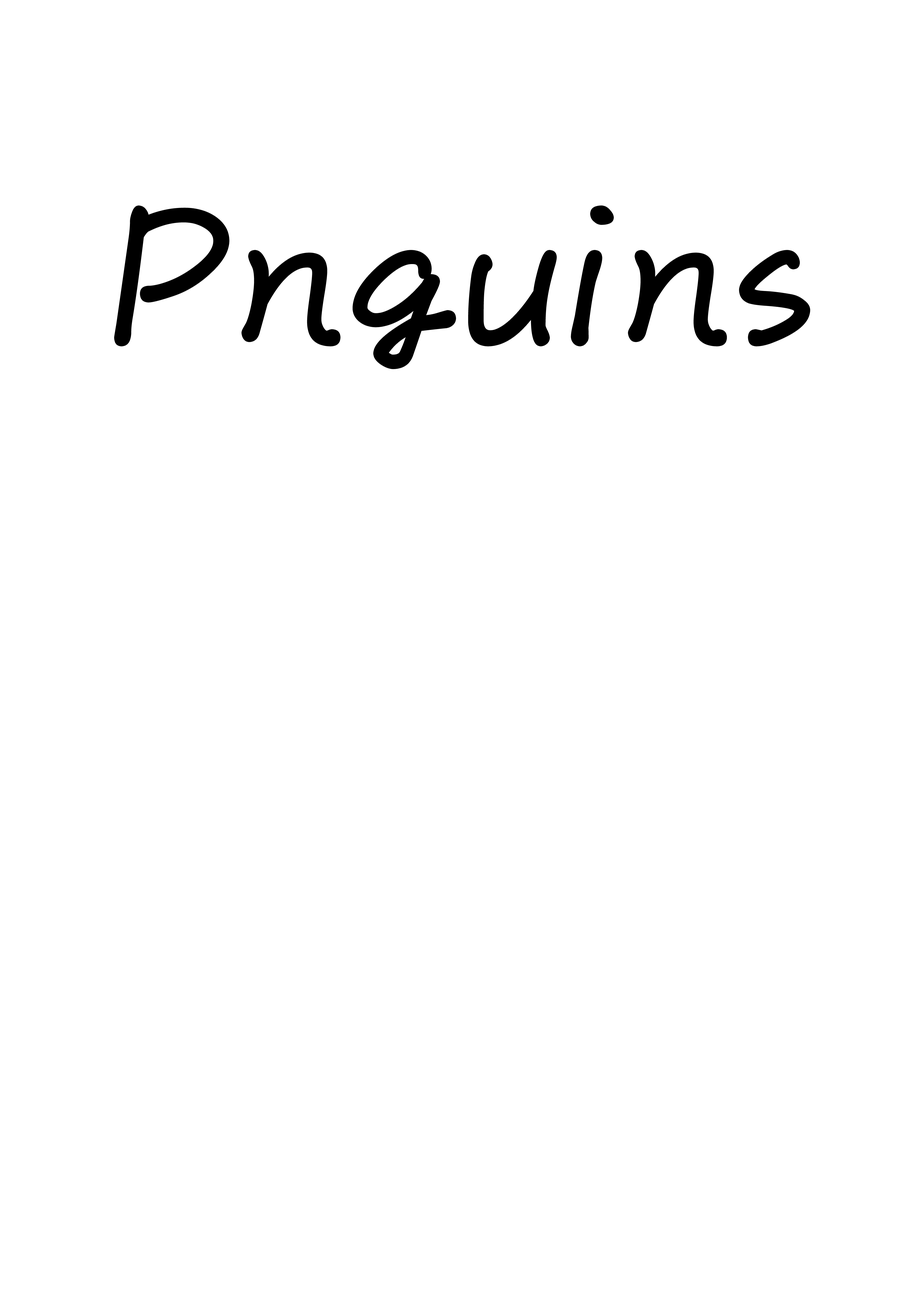
<style>
.page{position:relative;width:918px;height:1299px;background:#ffffff}
.page>*{position:absolute;margin:0}
.t1{font:208px "DFTegakiKaku-W4-WING-RKSJ-H";color:#000000}
</style>
<div class="page">
<p class="t1" style="left:116px;top:208px;width:692px;height:159px">Pnguins</p>
</div>
